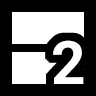
<style>
.page{position:relative;width:96px;height:96px;background:#000000}
.page>*{position:absolute;margin:0}
.t1{font:60px "Roboto-Bold";letter-spacing:-0.06em;color:#ffffff}
</style>
<div class="page">
<p class="t1" style="left:53px;top:40px;width:31px;height:44px">2</p>
</div>
